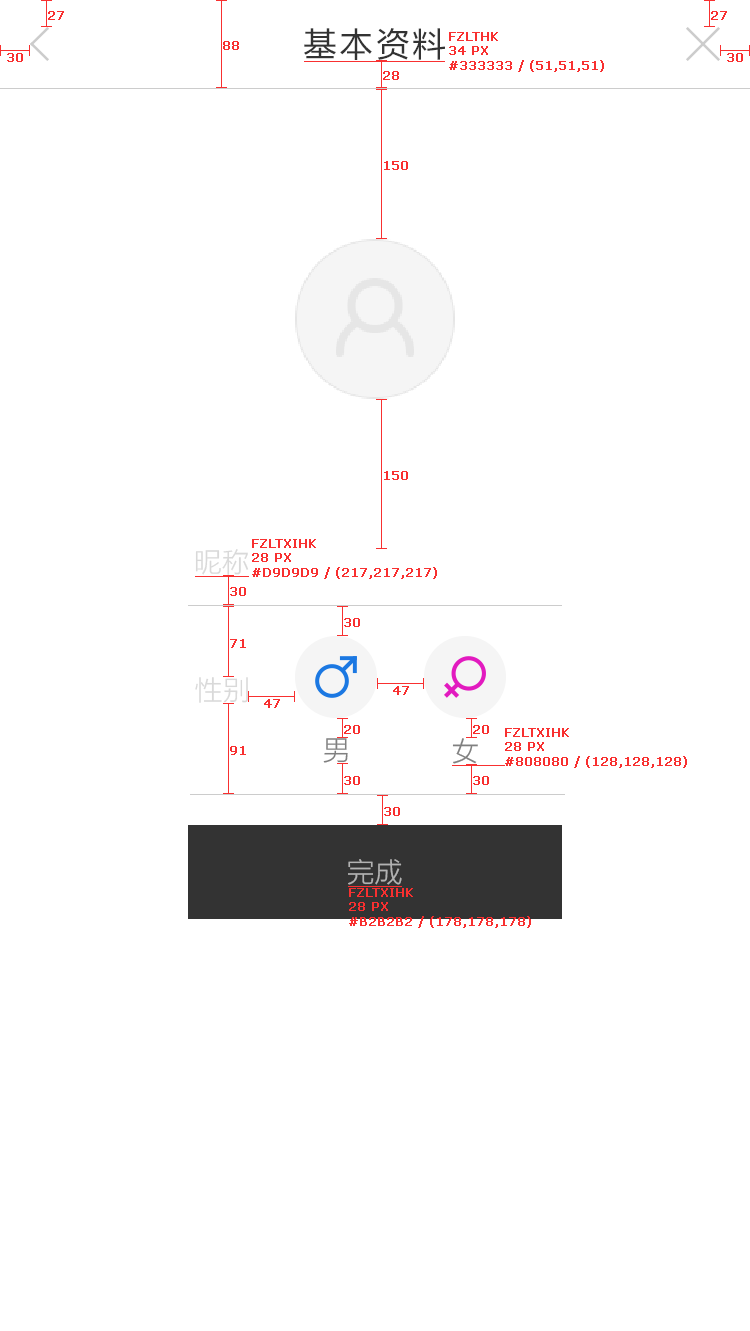
<style>
.page{position:relative;width:750px;height:1331px;background:#ffffff}
.page>*{position:absolute;margin:0}
.t1{font:12px "Verdana";color:#f83030;font-weight:bold}
.t2{font:34px "FZLTHK--GBK1-0";letter-spacing:0.06em;color:#333333}
.t3{font:28px "FZLTXIHK--GBK1-0";color:#d9d9d9}
.t4{font:28px "FZLTXIHK--GBK1-0";letter-spacing:0.06em;color:#808080}
.t5{font:28px "FZLTXIHK--GBK1-0";color:#b2b2b2}
</style>
<div class="page">
<p class="t1" style="left:48px;top:11px;width:16px;height:9px">27</p>
<p class="t1" style="left:711px;top:11px;width:16px;height:9px">27</p>
<p class="t2" style="left:304px;top:28px;width:141px;height:32px">基本资料</p>
<p class="t1" style="left:223px;top:41px;width:16px;height:9px">88</p>
<p class="t1" style="left:449px;top:32px;width:155px;height:40px">FZLTHK <br>34 PX<br>#333333 / (51,51,51)</p>
<p class="t1" style="left:7px;top:53px;width:16px;height:9px">30</p>
<p class="t1" style="left:727px;top:53px;width:16px;height:9px">30</p>
<p class="t1" style="left:383px;top:71px;width:16px;height:9px">28</p>
<p class="t1" style="left:384px;top:161px;width:24px;height:9px">150</p>
<p class="t1" style="left:384px;top:471px;width:24px;height:9px">150</p>
<p class="t1" style="left:252px;top:539px;width:185px;height:40px">FZLTXIHK <br>28 PX<br>#D9D9D9 / (217,217,217)</p>
<p class="t3" style="left:195px;top:549px;width:54px;height:26px">昵称</p>
<p class="t1" style="left:230px;top:587px;width:16px;height:9px">30</p>
<p class="t1" style="left:344px;top:618px;width:16px;height:9px">30</p>
<p class="t1" style="left:230px;top:639px;width:16px;height:9px">71</p>
<p class="t3" style="left:195px;top:677px;width:53px;height:26px">性别</p>
<p class="t1" style="left:393px;top:686px;width:16px;height:9px">47</p>
<p class="t1" style="left:264px;top:699px;width:16px;height:9px">47</p>
<p class="t1" style="left:344px;top:725px;width:16px;height:9px">20</p>
<p class="t1" style="left:473px;top:725px;width:16px;height:9px">20</p>
<p class="t1" style="left:505px;top:728px;width:182px;height:40px">FZLTXIHK <br>28 PX<br>#808080 / (128,128,128)</p>
<p class="t1" style="left:230px;top:746px;width:16px;height:9px">91</p>
<p class="t4" style="left:323px;top:738px;width:25px;height:25px">男</p>
<p class="t4" style="left:452px;top:738px;width:26px;height:26px">女</p>
<p class="t1" style="left:344px;top:776px;width:16px;height:9px">30</p>
<p class="t1" style="left:473px;top:776px;width:16px;height:9px">30</p>
<p class="t1" style="left:384px;top:807px;width:16px;height:9px">30</p>
<p class="t5" style="left:348px;top:859px;width:54px;height:26px">完成</p>
<p class="t1" style="left:349px;top:888px;width:182px;height:40px">FZLTXIHK <br>28 PX<br>#B2B2B2 / (178,178,178)</p>
</div>
